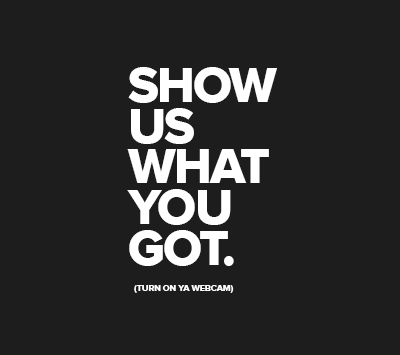
<style>
.page{position:relative;width:400px;height:355px;background:#1d1d1d}
.page>*{position:absolute;margin:0}
.t1{font:51.3px/40.8px "ProximaNova-Extrabld";letter-spacing:-0.04em;color:#ffffff}
.t2{font:9px "ProximaNova-Extrabld";letter-spacing:-0.02em;color:#ffffff}
</style>
<div class="page">
<p class="t1" style="left:127px;top:67px;width:150px;height:199px">SHOW US WHAT YOU <br>GOT.</p>
<p class="t2" style="left:134px;top:285px;width:100px;height:8px">(TURN ON YA WEBCAM)</p>
</div>
